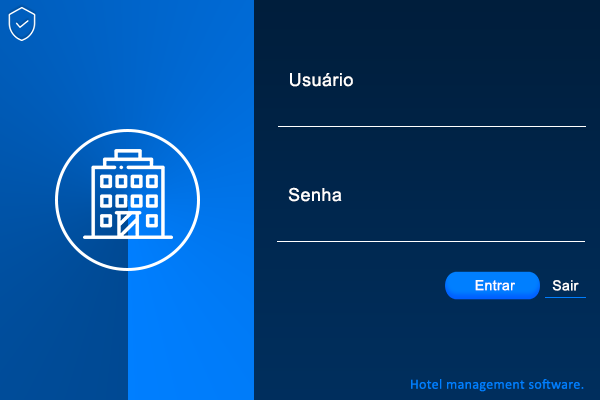
<style>
.page{position:relative;width:600px;height:400px}
.page>*{position:absolute;margin:0}
.t1{font:18px "ArialMT";letter-spacing:0.025em;color:#ffffff}
.t2{font:14px "ArialMT";letter-spacing:0.025em;color:#ffffff}
.t3{font:14px "Calibri";letter-spacing:0.025em;color:#007efe}
</style>
<div class="page">
<p class="t1" style="left:290px;top:73px;width:63px;height:14px">Usuário</p>
<p class="t1" style="left:288px;top:187px;width:54px;height:15px">Senha</p>
<p class="t2" style="left:475px;top:280px;width:40px;height:11px">Entrar</p>
<p class="t2" style="left:552px;top:280px;width:27px;height:11px">Sair</p>
<p class="t3" style="left:411px;top:379px;width:173px;height:13px">Hotel management software.</p>
</div>
